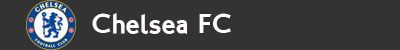
<style>
.page{position:relative;width:400px;height:50px;background:#333333}
.page>*{position:absolute;margin:0}
.t1{font:27px "LondonTwo";color:#fdfcf8}
</style>
<div class="page">
<p class="t1" style="left:92px;top:13px;width:139px;height:21px">Chelsea FC</p>
</div>
